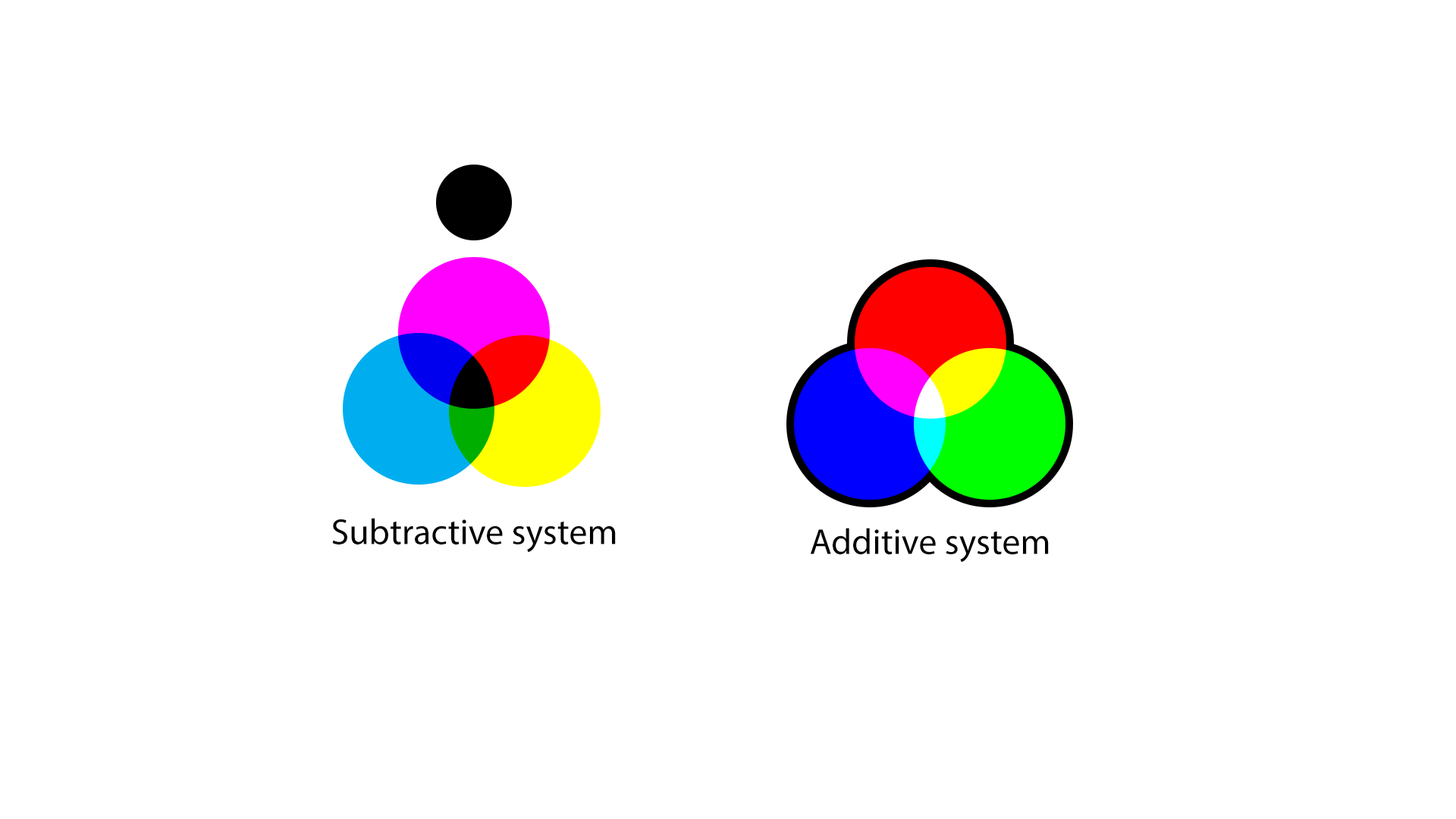
<style>
.page{position:relative;width:1456px;height:819px;background:#ffffff}
.page>*{position:absolute;margin:0}
.t1{font:36.4px "MyriadPro-Regular";color:#000000}
</style>
<div class="page">
<p class="t1" style="left:332px;top:518px;width:284px;height:34px">Subtractive system</p>
<p class="t1" style="left:810px;top:528px;width:239px;height:34px">Additive system</p>
</div>
